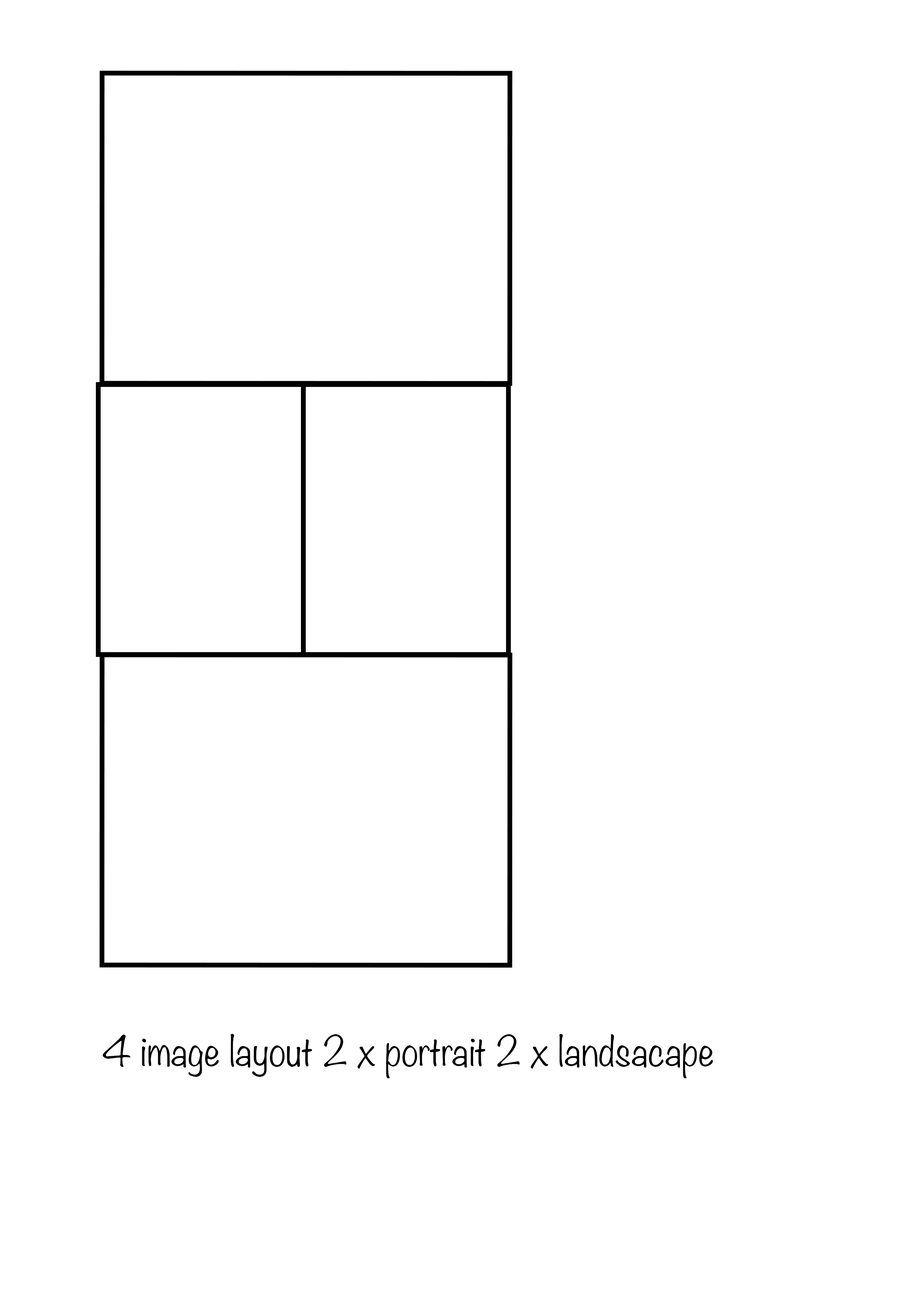
<style>
.page{position:relative;width:918px;height:1299px;background:#ffffff}
.page>*{position:absolute;margin:0}
.t1{font:37px "Noteworthy-Light";color:#000000}
</style>
<div class="page">
<p class="t1" style="left:103px;top:1034px;width:610px;height:44px">4 image layout 2 x portrait 2 x landsacape</p>
</div>
